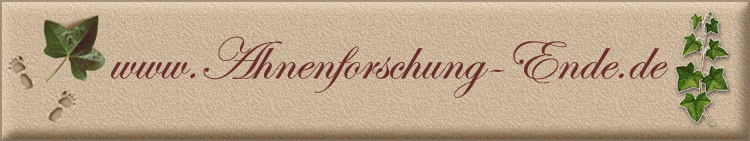
<style>
.page{position:relative;width:750px;height:141px}
.page>*{position:absolute;margin:0}
.t1{font:60px "EdwardianScriptITC";color:#6b2e2e}
</style>
<div class="page">
<p class="t1" style="left:110px;top:36px;width:558px;height:62px">www.Ahnenforschung-Ende.de</p>
</div>
